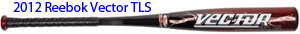
<style>
.page{position:relative;width:300px;height:34px;background:#ffffff}
.page>*{position:absolute;margin:0}
.t1{font:14px "MyriadPro-Regular";color:#0000ff}
</style>
<div class="page">
<p class="t1" style="left:13px;top:2px;width:138px;height:10px">2012 Reebok Vector TLS</p>
</div>
